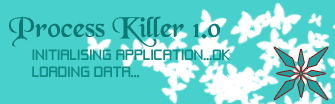
<style>
.page{position:relative;width:335px;height:104px;background:#48d1cc}
.page>*{position:absolute;margin:0}
.t1{font:30px "BlackChancery";color:#0e7874}
.t2{font:14px "ZeroThrees";color:#108c87}
</style>
<div class="page">
<p class="t1" style="left:9px;top:16px;width:211px;height:31px">Process Killer 1.0</p>
<p class="t2" style="left:32px;top:49px;width:198px;height:29px">INITIALISING APPLICATION...OK<br>LOADING DATA...</p>
</div>
